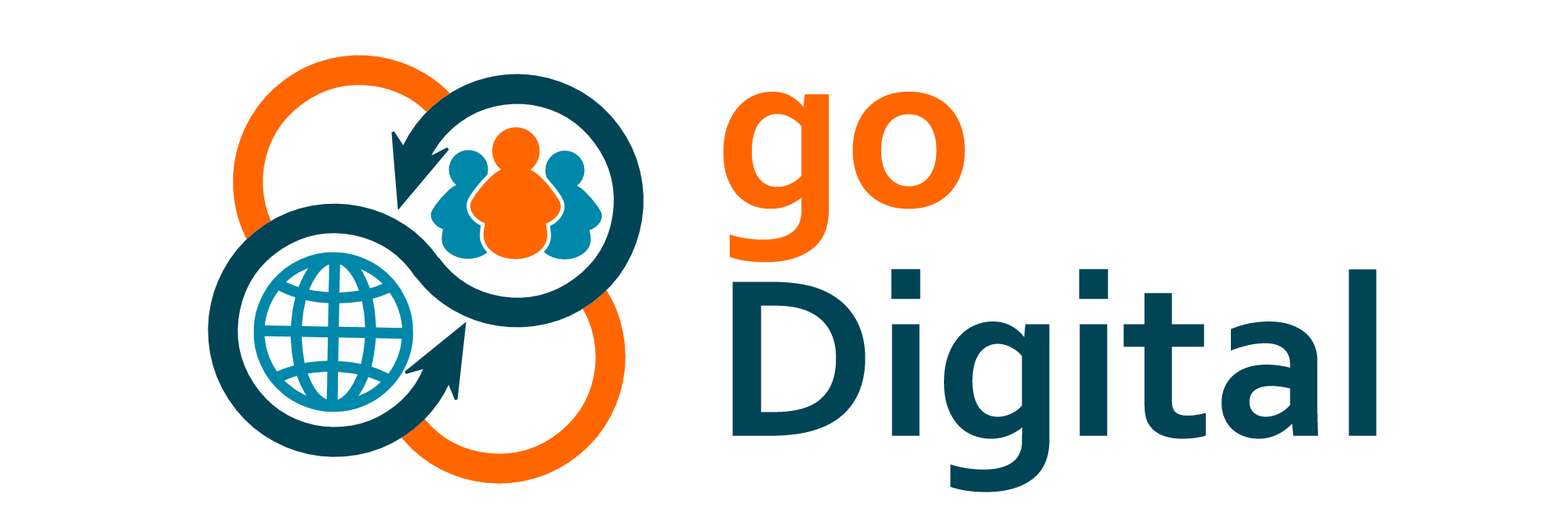
<style>
.page{position:relative;width:1568px;height:523px;background:#ffffff}
.page>*{position:absolute;margin:0}
.t1{font:235.2px "Corbel-Bold";color:#ff6600}
.t2{font:235.2px "Corbel-Bold";color:#004455}
</style>
<div class="page">
<p class="t1" style="left:723px;top:91px;width:242px;height:172px">go</p>
<p class="t2" style="left:732px;top:269px;width:645px;height:223px">Digital</p>
</div>
